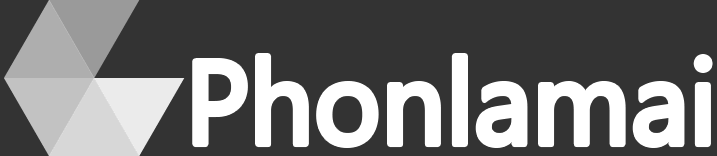
<style>
.page{position:relative;width:717px;height:156px;background:#333333}
.page>*{position:absolute;margin:0}
.t1{font:109.6px "MicrosoftYaHei";color:#ffffff;scale:0.96 1}
</style>
<div class="page">
<p class="t1" style="left:195px;top:56px;width:515px;height:89px">Phonlamai</p>
</div>
